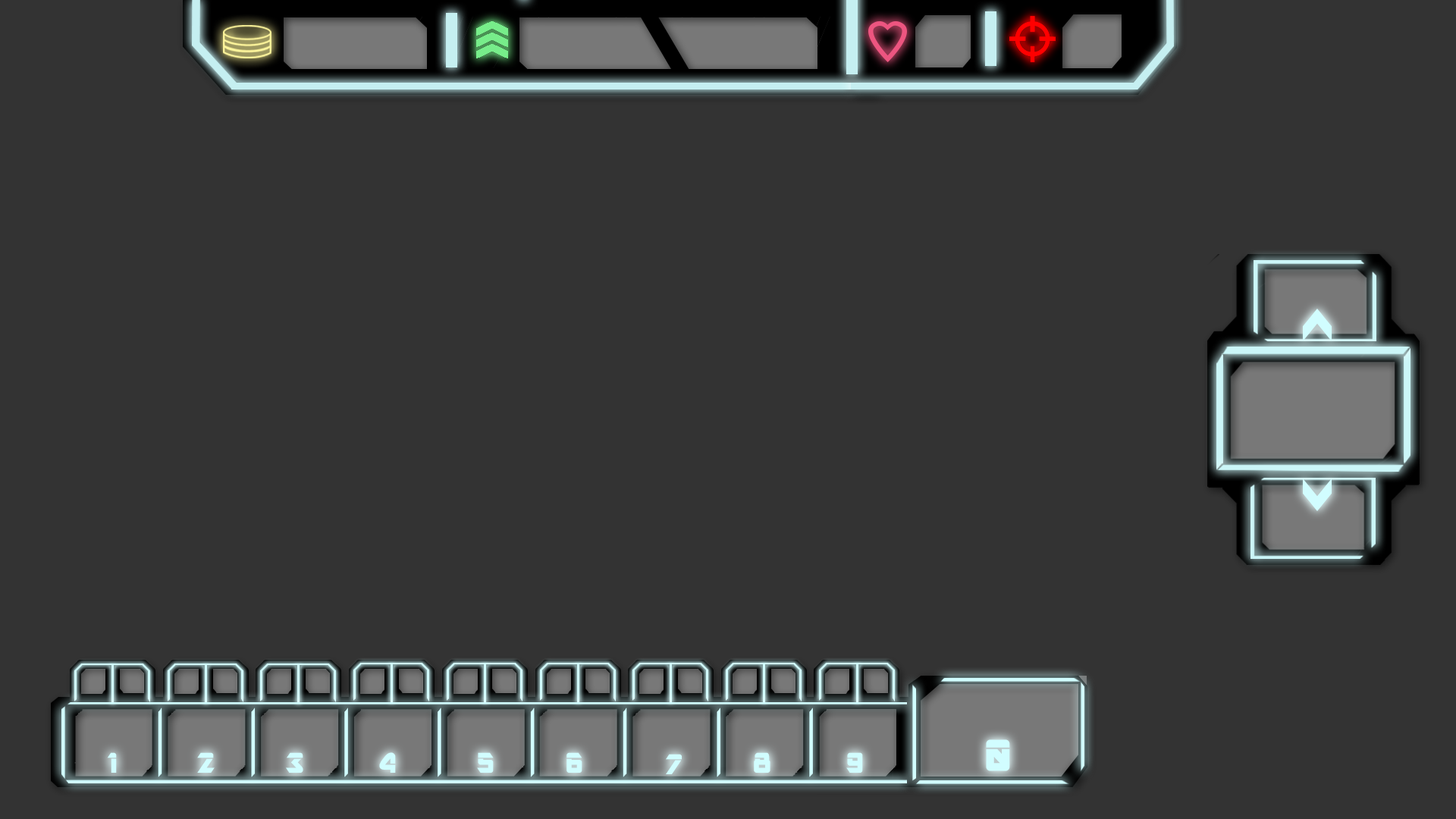
<style>
.page{position:relative;width:1456px;height:819px;background:#333333}
.page>*{position:absolute;margin:0}
.t1{font:49.4px "ARDESTINE";color:#d1fdff}
.t2{font:31.6px "ARDESTINE";color:#d1fdff}
</style>
<div class="page">
<p class="t1" style="left:986px;top:739px;width:24px;height:32px">0</p>
<p class="t2" style="left:107px;top:752px;width:10px;height:21px">1</p>
<p class="t2" style="left:197px;top:752px;width:18px;height:21px">2</p>
<p class="t2" style="left:286px;top:752px;width:17px;height:21px">3</p>
<p class="t2" style="left:379px;top:752px;width:17px;height:21px">4</p>
<p class="t2" style="left:477px;top:752px;width:17px;height:21px">5</p>
<p class="t2" style="left:566px;top:752px;width:16px;height:21px">6</p>
<p class="t2" style="left:666px;top:754px;width:16px;height:20px">7</p>
<p class="t2" style="left:754px;top:752px;width:16px;height:21px">8</p>
<p class="t2" style="left:846px;top:752px;width:17px;height:21px">9</p>
</div>
